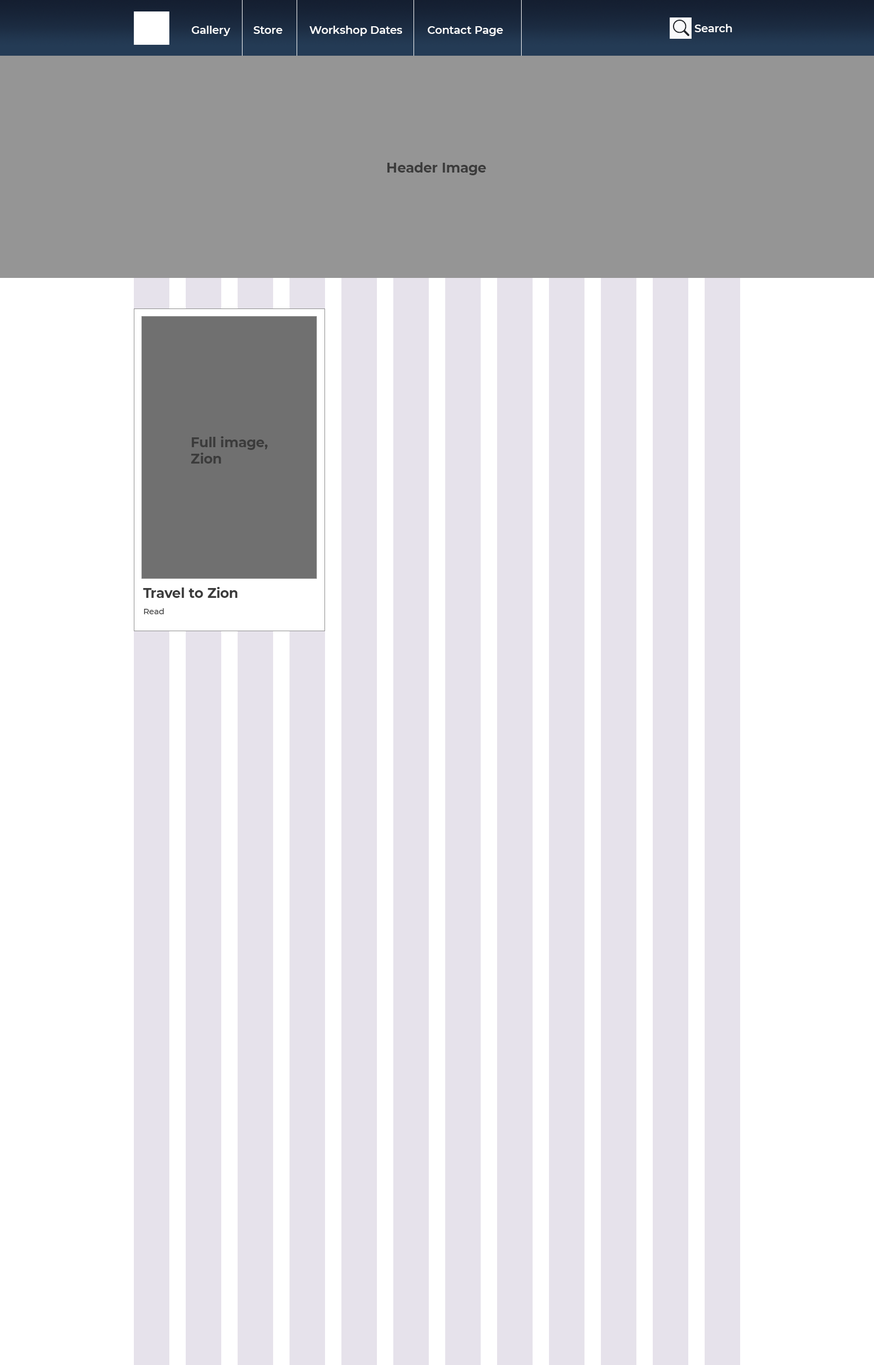
<style>
.page{position:relative;width:874px;height:1365px;background:#ffffff}
.page>*{position:absolute;margin:0}
.t1{font:10.9px "Montserrat-SemiBold";color:#ffffff}
.t2{font:13.6px "Montserrat-Bold";color:#3b3b3b}
.t3{font:8.2px/16.4px "Montserrat-Medium";color:#3b3b3b}
</style>
<div class="page">
<p class="t1" style="left:192px;top:26px;width:311px;height:10px">Gallery   Store  Workshop Dates  Contact Page</p>
<p class="t1" style="left:695px;top:24px;width:37px;height:8px">Search</p>
<p class="t2" style="left:387px;top:162px;width:99px;height:13px">Header Image</p>
<p class="t2" style="left:191px;top:436px;width:77px;height:28px">Full image,<br>Zion</p>
<p class="t2" style="left:143px;top:587px;width:95px;height:27px">Travel to Zion<br><span class="t3">Read</span></p>
</div>
